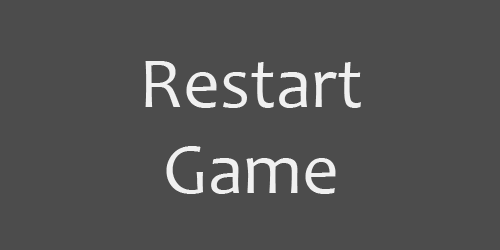
<style>
.page{position:relative;width:500px;height:250px;background:#4c4c4c}
.page>*{position:absolute;margin:0}
.t1{font:72px "Candara";color:#f0f0f0}
</style>
<div class="page">
<p class="t1" style="left:145px;top:61px;width:216px;height:133px;text-align:center">Restart<br>Game</p>
</div>
